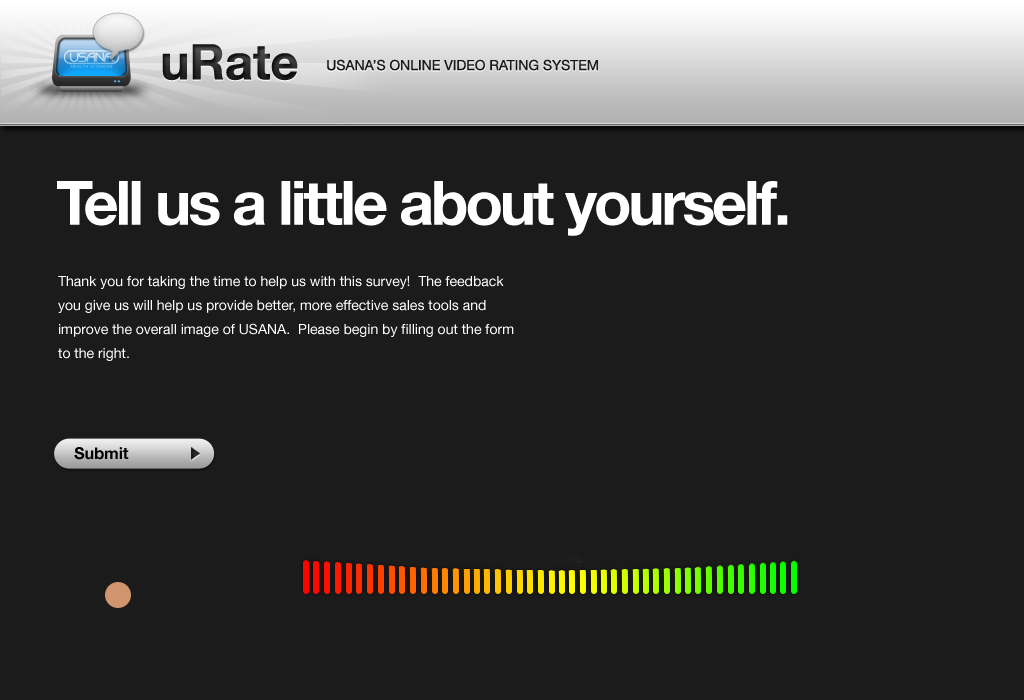
<style>
.page{position:relative;width:1024px;height:700px;background:#1b1b1b}
.page>*{position:absolute;margin:0}
.t1{font:49.2px "HelveticaNeue-Bold";color:#252525}
.t2{font:14px "HelveticaNeue";color:#252525}
.t3{font:61.2px "HelveticaNeue-Bold";letter-spacing:-0.05em;color:#ffffff}
.t4{font:14px/24px "HelveticaNeue";color:#ffffff}
.t5{font:16.2px "HelveticaNeue-Bold";color:#010101}
</style>
<div class="page">
<p class="t1" style="left:162px;top:44px;width:136px;height:37px">uRate</p>
<p class="t2" style="left:327px;top:59px;width:271px;height:12px">USANA’S ONLINE VIDEO RATING SYSTEM</p>
<p class="t3" style="left:57px;top:181px;width:731px;height:55px">Tell us a little about yourself.</p>
<p class="t4" style="left:58px;top:276px;width:456px;height:85px">Thank you for taking the time to help us with this survey!  The feedback you give us will help us provide better, more effective sales tools and improve the overall image of USANA.  Please begin by filling out the form to the right.</p>
<p class="t5" style="left:74px;top:447px;width:55px;height:13px">Submit</p>
</div>
